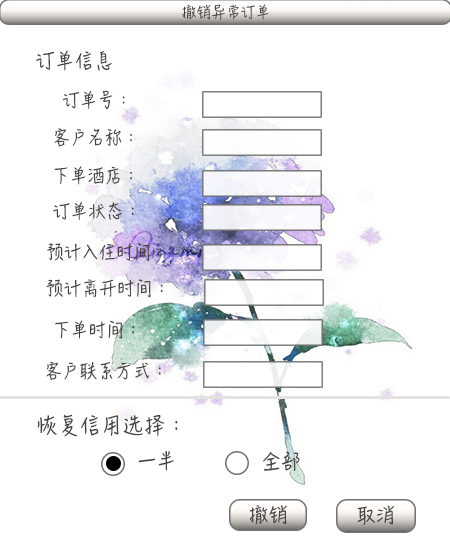
<style>
.page{position:relative;width:450px;height:550px;background:#ffffff}
.page>*{position:absolute;margin:0}
.t1{font:14.7px "HanziPenSC-W5";letter-spacing:-0.005em;color:#474444;text-transform:uppercase}
.t2{font:19.2px "HanziPenSC-W5";letter-spacing:-0.005em;color:#474444;text-transform:uppercase}
.t3{font:17.4px "HanziPenSC-W5";letter-spacing:-0.005em;color:#474444;text-transform:uppercase}
.t4{font:21px "HanziPenSC-W5";letter-spacing:-0.005em;color:#474444;text-transform:uppercase}
</style>
<div class="page">
<p class="t1" style="left:182px;top:4px;width:87px;height:16px">撤销异常订单</p>
<p class="t2" style="left:36px;top:50px;width:76px;height:21px">订单信息</p>
<p class="t3" style="left:63px;top:90px;width:62px;height:19px">订单号：</p>
<p class="t3" style="left:54px;top:128px;width:78px;height:19px">客户名称：</p>
<p class="t3" style="left:54px;top:166px;width:78px;height:19px">下单酒店：</p>
<p class="t3" style="left:53px;top:202px;width:81px;height:19px">订单状态：</p>
<p class="t3" style="left:47px;top:243px;width:115px;height:18px">预计入住时间：</p>
<p class="t3" style="left:46px;top:279px;width:117px;height:19px">预计离开时间：</p>
<p class="t3" style="left:55px;top:320px;width:80px;height:19px">下单时间：</p>
<p class="t3" style="left:46px;top:361px;width:115px;height:19px">客户联系方式：</p>
<p class="t4" style="left:37px;top:414px;width:141px;height:23px">恢复信用选择：</p>
</div>
